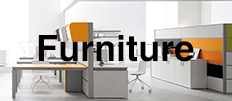
<style>
.page{position:relative;width:232px;height:101px}
.page>*{position:absolute;margin:0}
.t1{font:36px "Helvetica-Bold";color:#000000}
</style>
<div class="page">
<p class="t1" style="left:38px;top:35px;width:156px;height:27px">Furniture</p>
</div>
